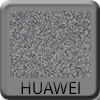
<style>
.page{position:relative;width:100px;height:100px}
.page>*{position:absolute;margin:0}
.t1{font:18px "MyriadHebrew-Regular";color:#000000}
</style>
<div class="page">
<p class="t1" style="left:21px;top:81px;width:59px;height:14px">HUAWEI</p>
</div>
